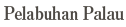
<style>
.page{position:relative;width:126px;height:27px;background:#ffffff}
.page>*{position:absolute;margin:0}
.t1{font:18px "RyuminPro-ExBold";letter-spacing:-0.04em;color:#4c4843;scale:0.9 1}
</style>
<div class="page">
<p class="t1" style="left:4px;top:6px;width:120px;height:14px">Pelabuhan Palau</p>
</div>
